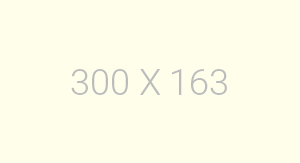
<style>
.page{position:relative;width:300px;height:163px;background:#fffeeb}
.page>*{position:absolute;margin:0}
.t1{font:36px "Roboto-Light";color:#bcbcbc}
</style>
<div class="page">
<p class="t1" style="left:71px;top:69px;width:156px;height:26px">300 X 163</p>
</div>
